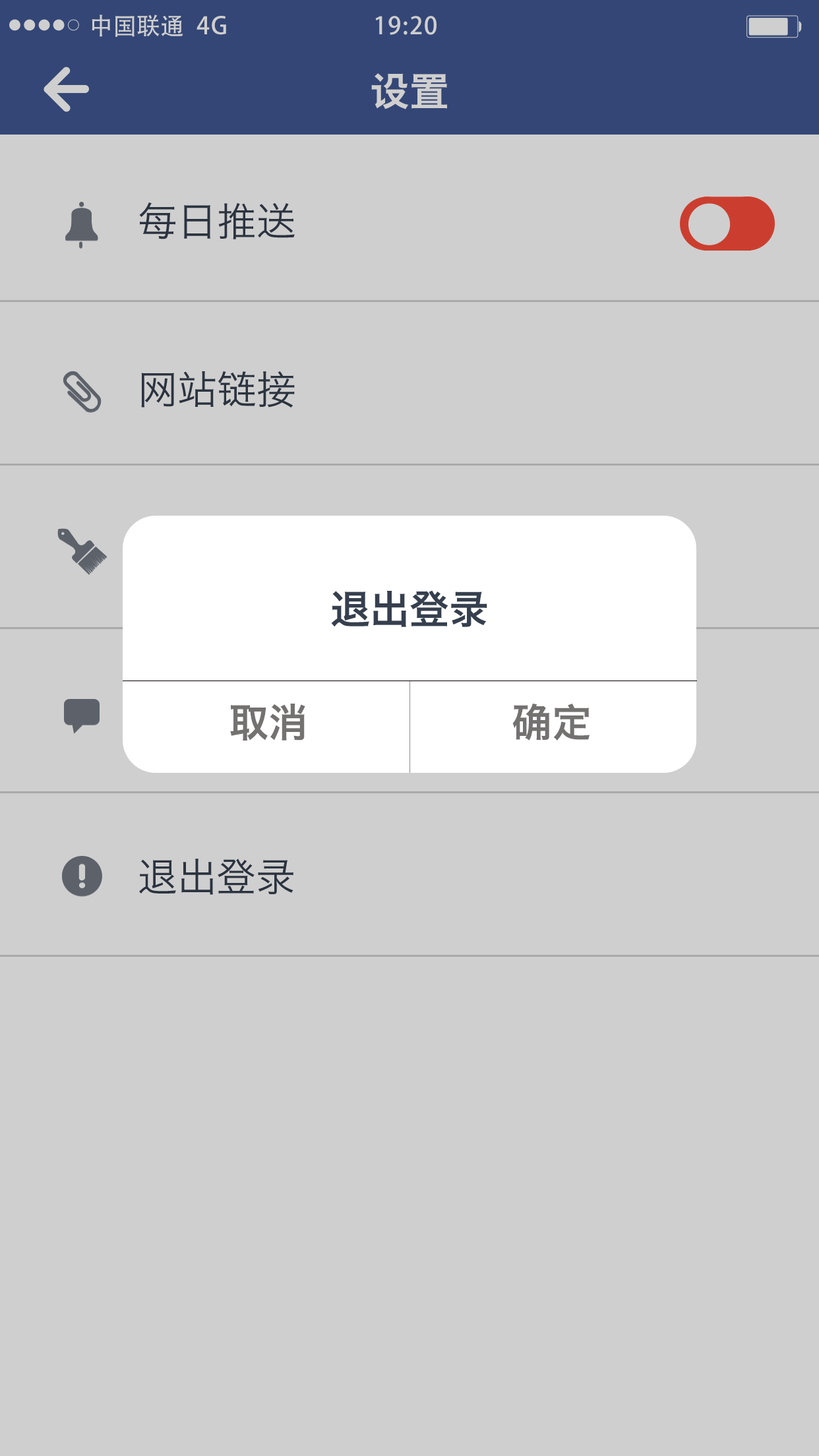
<style>
.page{position:relative;width:819px;height:1456px;background:#cfcfcf}
.page>*{position:absolute;margin:0}
.t1{font:23.8px "STHeiti";color:#cfcfcf}
.t2{font:23.8px "AdobeHeitiStd-Regular";letter-spacing:0.05em;color:#cfcfcf}
.t3{font:39.6px "HiraginoSansGB-W6";color:#cfcfcf}
.t4{font:39.6px "HiraginoSansGB-W3";color:#3e3a39}
.t5{font:39.6px "HiraginoSansGB-W6";color:#3e3a39}
.t6{font:39.6px "HiraginoSansGB-W6";color:#747171}
.t7{font:39.5px "HiraginoSansGB-W3";color:#3e3a39}
</style>
<div class="page">
<p class="t1" style="left:92px;top:15px;width:91px;height:22px">中国联通</p>
<p class="t2" style="left:197px;top:16px;width:29px;height:19px">4G</p>
<p class="t2" style="left:375px;top:16px;width:62px;height:19px">19:20</p>
<p class="t3" style="left:371px;top:73px;width:76px;height:36px">设置</p>
<p class="t4" style="left:139px;top:202px;width:156px;height:37px">每日推送</p>
<p class="t4" style="left:141px;top:371px;width:154px;height:37px">网站链接</p>
<p class="t5" style="left:331px;top:590px;width:156px;height:37px">退出登录</p>
<p class="t6" style="left:230px;top:704px;width:75px;height:37px">取消</p>
<p class="t6" style="left:512px;top:704px;width:78px;height:37px">确定</p>
<p class="t7" style="left:139px;top:859px;width:154px;height:36px">退出登录</p>
</div>
